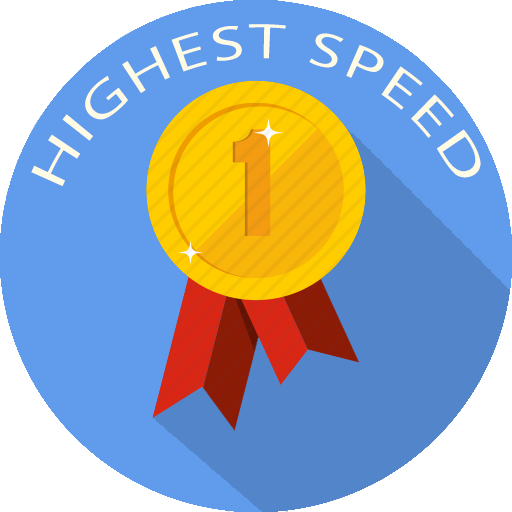
<style>
.page{position:relative;width:512px;height:512px;background:#609bec}
.page>*{position:absolute;margin:0}
.t1{font:50px/10px "MyriadPro-Regular";letter-spacing:0.075em;color:#fffbe4;text-transform:uppercase}
</style>
<div class="page">
<p class="t1" style="left:31px;top:24px;width:450px;height:162px;text-align:center">HIGHEST SPEED</p>
</div>
